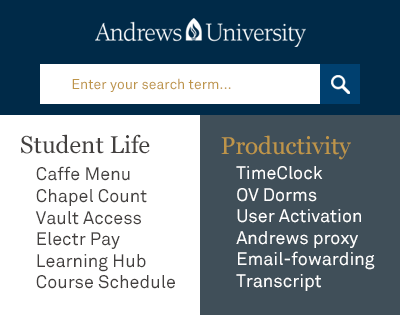
<style>
.page{position:relative;width:400px;height:315px;background:#ffffff}
.page>*{position:absolute;margin:0}
.t1{font:14px "AUAkkurat";color:#be9549}
.t2{font:24px "Georgia";color:#43403f}
.t3{font:24px "Georgia";color:#be9549}
.t4{font:18px "AUAkkurat";color:#43403f}
.t5{font:18px "AUAkkurat";color:#ffffff}
</style>
<div class="page">
<p class="t1" style="left:72px;top:78px;width:159px;height:14px">Enter your search term...</p>
<p class="t2" style="left:21px;top:134px;width:129px;height:20px">Student Life</p>
<p class="t3" style="left:221px;top:135px;width:130px;height:25px">Productivity</p>
<p class="t4" style="left:35px;top:166px;width:140px;height:123px">Caffe Menu<br>Chapel Count<br>Vault Access<br>Electr Pay<br>Learning Hub<br>Course Schedule</p>
<p class="t5" style="left:236px;top:166px;width:139px;height:125px">TimeClock<br>OV Dorms<br>User Activation<br>Andrews proxy<br>Email-fowarding<br>Transcript</p>
</div>
